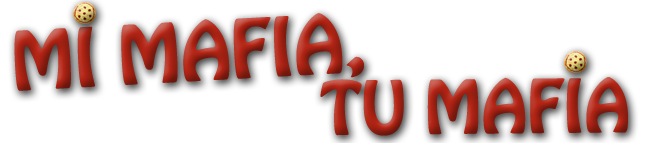
<style>
.page{position:relative;width:650px;height:143px;background:#ffffff}
.page>*{position:absolute;margin:0}
.t1{font:72px "HoboStd";text-transform:uppercase}
.t2{font:65.4px "HoboStd";text-transform:uppercase}
</style>
<div class="page">
<p class="t1" style="left:14px;top:13px;width:350px;height:78px;rotate:-3deg">mi mafia,</p>
<p class="t2" style="left:320px;top:77px;width:308px;height:59px;rotate:-1deg">tu mafia</p>
</div>
